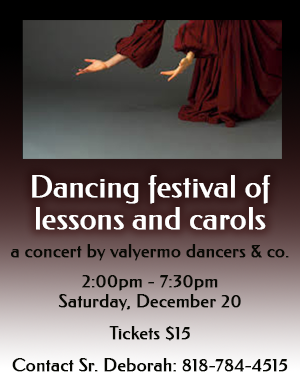
<style>
.page{position:relative;width:300px;height:392px}
.page>*{position:absolute;margin:0}
.t1{font:30px/32px "Federo-Regular";color:#ffffff;font-weight:bold}
.t2{font:18px/20px "Federo-Regular";color:#080904;font-weight:bold}
.t3{font:18px/32px "Federo-Regular";color:#080904;font-weight:bold}
</style>
<div class="page">
<p class="t1" style="left:32px;top:175px;width:239px;height:55px;text-align:center">Dancing festival of lessons and carols</p>
<p class="t2" style="left:11px;top:244px;width:278px;height:128px;text-align:center">a concert by valyermo dancers &amp; co.<br><br>2:00pm - 7:30pm<br>Saturday, December 20<br><span class="t3">Tickets $15<br>Contact Sr. Deborah: 818-784-4515</span></p>
</div>
